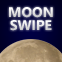
<style>
.page{position:relative;width:62px;height:62px}
.page>*{position:absolute;margin:0}
.t1{font:14px "SegoeWP-Bold";color:#e5e5e5}
.t2{font:14px "SegoeWP-Bold"}
</style>
<div class="page">
<p class="t1" style="left:9px;top:7px;width:44px;height:11px">MOON</p>
<p class="t2" style="left:10px;top:20px;width:42px;height:11px">SWIPE</p>
</div>
